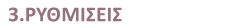
<style>
.page{position:relative;width:227px;height:28px;background:#ffffff}
.page>*{position:absolute;margin:0}
.t1{font:21.6px "Calibri-Bold";color:#97717e}
</style>
<div class="page">
<p class="t1" style="left:9px;top:7px;width:113px;height:15px">3.ΡΥΘΜΙΣΕΙΣ</p>
</div>
